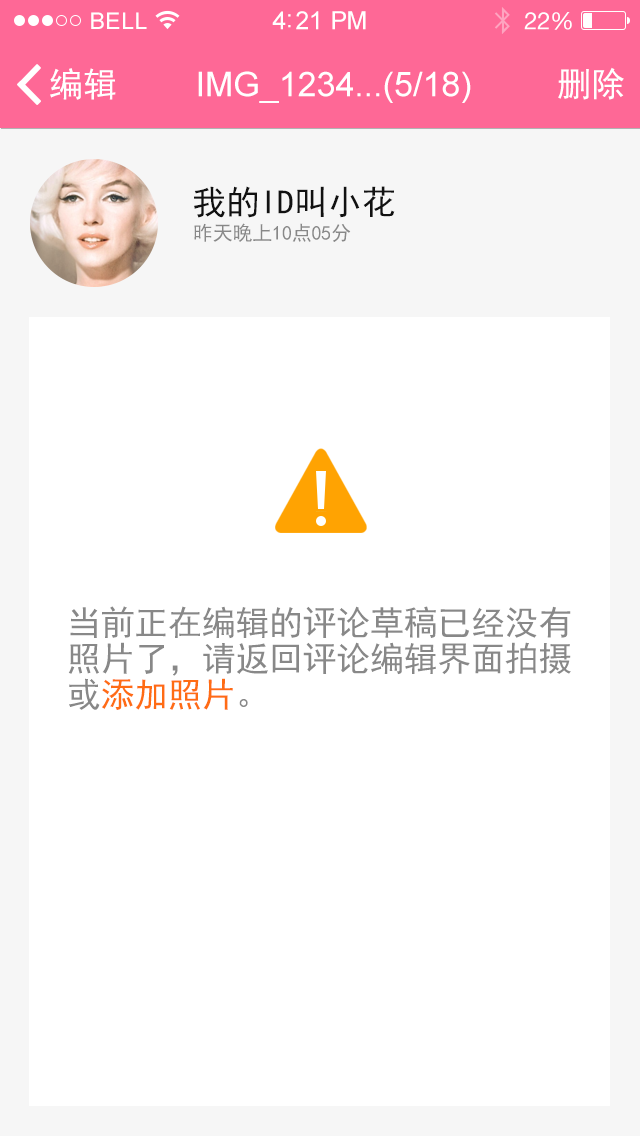
<style>
.page{position:relative;width:640px;height:1136px;background:#ffffff}
.page>*{position:absolute;margin:0}
.t1{font:23px "ArialMT";letter-spacing:0.02em;color:#ffffff}
.t2{font:25px "ArialMT";letter-spacing:-0.02em;color:#ffffff}
.t3{font:24px "HelveticaNeue";letter-spacing:-0.02em;color:#ffffff}
.t4{font:34px "SimHei";color:#ffffff}
.t5{font:34px "ArialMT";color:#ffffff}
.t6{font:34px "SimHei";color:#111111}
.t7{font:20px "SimHei";letter-spacing:-0.01em;color:#888888}
.t8{font:34px/36px "SimHei";letter-spacing:-0.01em;color:#888888}
.t9{font:34px/36px "SimHei";letter-spacing:-0.01em;color:#ff6c14}
</style>
<div class="page">
<p class="t1" style="left:91px;top:12px;width:56px;height:17px">BELL</p>
<p class="t2" style="left:272px;top:11px;width:94px;height:19px">4:21 PM</p>
<p class="t3" style="left:524px;top:12px;width:48px;height:18px">22%</p>
<p class="t4" style="left:50px;top:68px;width:66px;height:32px">编辑</p>
<p class="t5" style="left:198px;top:71px;width:273px;height:32px">IMG_1234...(5/18)</p>
<p class="t4" style="left:558px;top:67px;width:66px;height:33px">删除</p>
<p class="t6" style="left:194px;top:186px;width:201px;height:32px">我的ID叫小花</p>
<p class="t7" style="left:194px;top:223px;width:157px;height:19px">昨天晚上10点05分</p>
<p class="t8" style="left:68px;top:606px;width:503px;height:104px">当前正在编辑的评论草稿已经没有照片了，请返回评论编辑界面拍摄或<span class="t9">添加照片</span>。</p>
</div>
